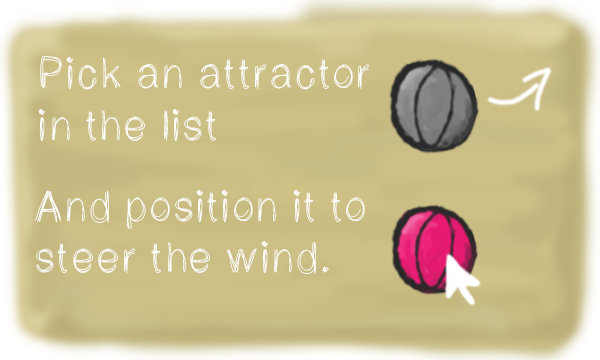
<style>
.page{position:relative;width:600px;height:360px}
.page>*{position:absolute;margin:0}
.t1{font:43px "LightScribe";color:#ffffff}
</style>
<div class="page">
<p class="t1" style="left:38px;top:56px;width:331px;height:86px">Pick an attractor<br>in the list</p>
<p class="t1" style="left:35px;top:190px;width:330px;height:84px">And position it to<br>steer the wind.</p>
</div>
